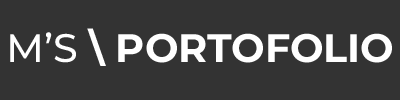
<style>
.page{position:relative;width:400px;height:100px;background:#333333}
.page>*{position:absolute;margin:0}
.t1{font:39.8px "Montserrat-Bold";color:#ffffff}
.t2{font:39.8px "Montserrat-Medium";color:#ffffff}
</style>
<div class="page">
<p class="t1" style="left:10px;top:28px;width:382px;height:38px"><span class="t2">M’S </span>\ PORTOFOLIO</p>
</div>
